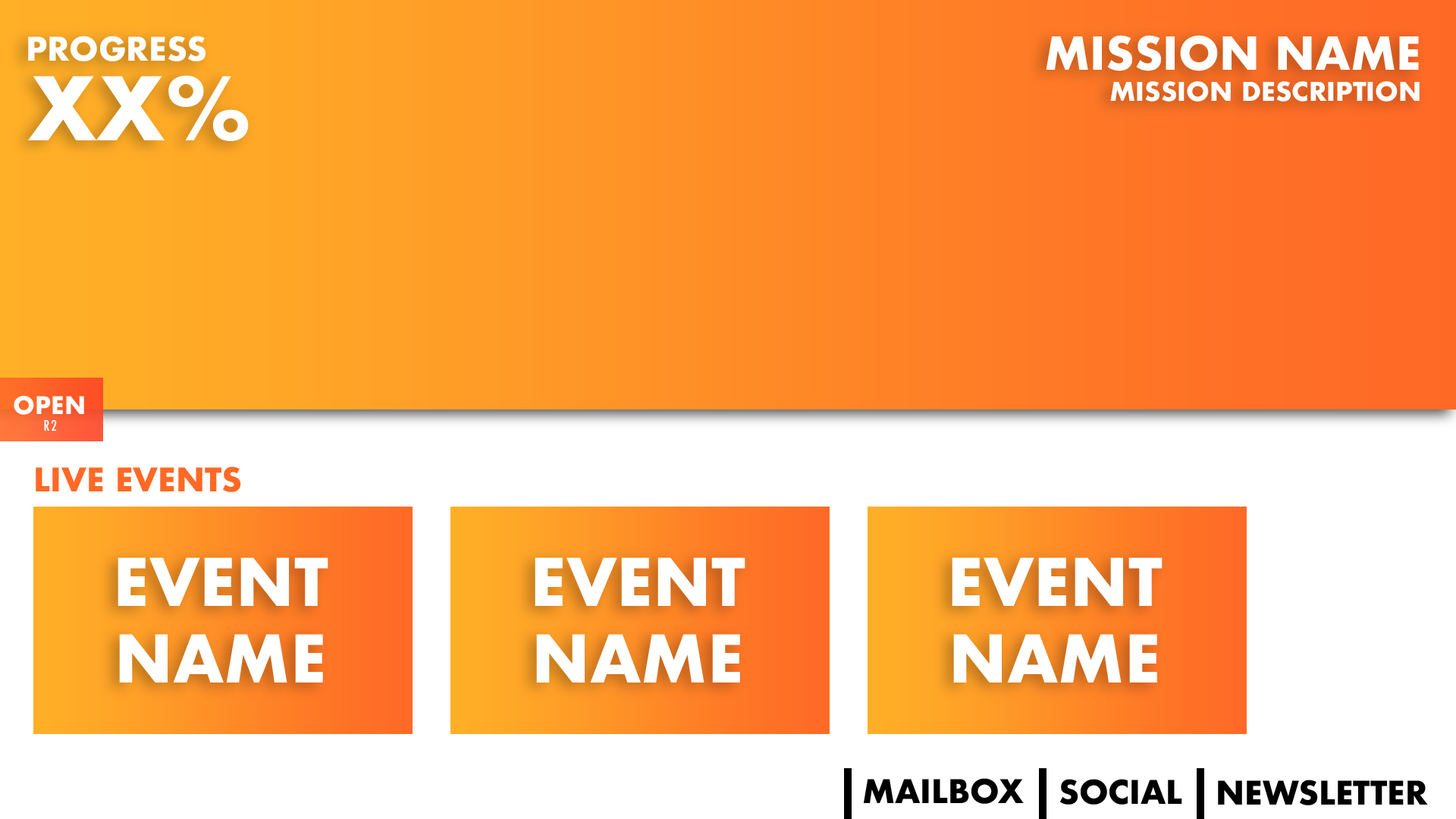
<style>
.page{position:relative;width:1456px;height:819px;background:#ffffff}
.page>*{position:absolute;margin:0}
.t1{font:31.6px "Futura-Bold";color:#ffffff}
.t2{font:44.2px "Futura-Bold";color:#ffffff}
.t3{font:85.2px "Futura-Bold";color:#ffffff}
.t4{font:25.3px "Futura-Bold";color:#ffffff}
.t5{font:23.6px "Futura-Bold";color:#ffffff}
.t6{font:14.1px "Futura-CondensedMedium";letter-spacing:0.1em;color:#ffffff}
.t7{font:31.6px "Futura-Bold";color:#ff6925}
.t8{font:63.9px "Futura-Bold";color:#ffffff}
.t9{font:31.6px "Futura-Bold";color:#000000}
</style>
<div class="page">
<p class="t1" style="left:28px;top:36px;width:178px;height:25px">PROGRESS</p>
<p class="t2" style="left:1046px;top:35px;width:373px;height:36px">MISSION NAME</p>
<p class="t3" style="left:28px;top:75px;width:221px;height:67px">XX%</p>
<p class="t4" style="left:1110px;top:81px;width:310px;height:21px">MISSION DESCRIPTION</p>
<p class="t5" style="left:14px;top:396px;width:70px;height:19px">OPEN</p>
<p class="t6" style="left:44px;top:419px;width:13px;height:12px">R2</p>
<p class="t7" style="left:36px;top:466px;width:205px;height:26px">LIVE EVENTS</p>
<p class="t8" style="left:118px;top:557px;width:210px;height:125px;text-align:center">EVENT<br>NAME</p>
<p class="t8" style="left:535px;top:557px;width:210px;height:125px;text-align:center">EVENT<br>NAME</p>
<p class="t8" style="left:952px;top:557px;width:211px;height:125px;text-align:center">EVENT<br>NAME</p>
<p class="t9" style="left:864px;top:778px;width:160px;height:26px">MAILBOX</p>
<p class="t9" style="left:1060px;top:779px;width:122px;height:26px">SOCIAL</p>
<p class="t9" style="left:1218px;top:780px;width:210px;height:25px">NEWSLETTER</p>
</div>
